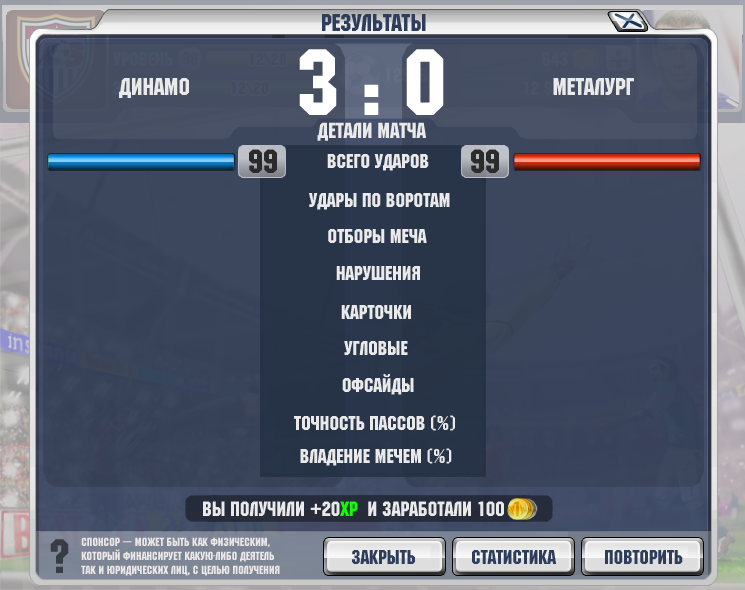
<style>
.page{position:relative;width:745px;height:590px}
.page>*{position:absolute;margin:0}
.t1{font:24.3px "MachineCTT";color:#2f3d5c}
.t2{font:93.8px "MachineCTT";letter-spacing:0.24em;color:#ffffff}
.t3{font:24.3px "MachineCTT";color:#eaeaea}
.t4{font:21.7px "MachineCTT";color:#eaeaea}
.t5{font:33.6px "MachineCTT";color:#2b2b2b}
.t6{font:20.1px "MachineCTT";color:#eaeaea}
.t7{font:20.6px "MachineCTT";color:#eaeaea}
.t8{font:20.6px "MachineCTT";color:#12ff00}
.t9{font:11.8px "MachineCTT";color:#ece8e8}
</style>
<div class="page">
<p class="t1" style="left:322px;top:14px;width:104px;height:17px">Результаты</p>
<p class="t2" style="left:299px;top:49px;width:145px;height:66px">3:0</p>
<p class="t3" style="left:119px;top:78px;width:70px;height:20px">динамо</p>
<p class="t3" style="left:553px;top:78px;width:81px;height:17px">металург</p>
<p class="t4" style="left:317px;top:122px;width:110px;height:19px">Детали матча</p>
<p class="t5" style="left:249px;top:149px;width:28px;height:24px">99</p>
<p class="t5" style="left:471px;top:149px;width:28px;height:24px">99</p>
<p class="t6" style="left:327px;top:154px;width:102px;height:17px">всего ударов</p>
<p class="t6" style="left:309px;top:193px;width:141px;height:17px">удары по воротам</p>
<p class="t6" style="left:328px;top:229px;width:99px;height:14px">отборы меча</p>
<p class="t6" style="left:336px;top:266px;width:84px;height:14px">нарушения</p>
<p class="t6" style="left:341px;top:305px;width:70px;height:14px">карточки</p>
<p class="t6" style="left:344px;top:341px;width:64px;height:14px">угловые</p>
<p class="t6" style="left:342px;top:374px;width:72px;height:21px">офсайды</p>
<p class="t6" style="left:294px;top:415px;width:161px;height:16px">точность пассов (%)</p>
<p class="t6" style="left:300px;top:448px;width:152px;height:18px">Владение мечем (%)</p>
<p class="t7" style="left:203px;top:501px;width:301px;height:15px">вы получили +20<span class="t8">XP</span>  и заработали 100</p>
<p class="t9" style="left:81px;top:537px;width:199px;height:39px">Спонсор — может быть как физическим,<br>который финансирует какую-либо деятель<br>так и юридических лиц, c целью получения</p>
</div>
